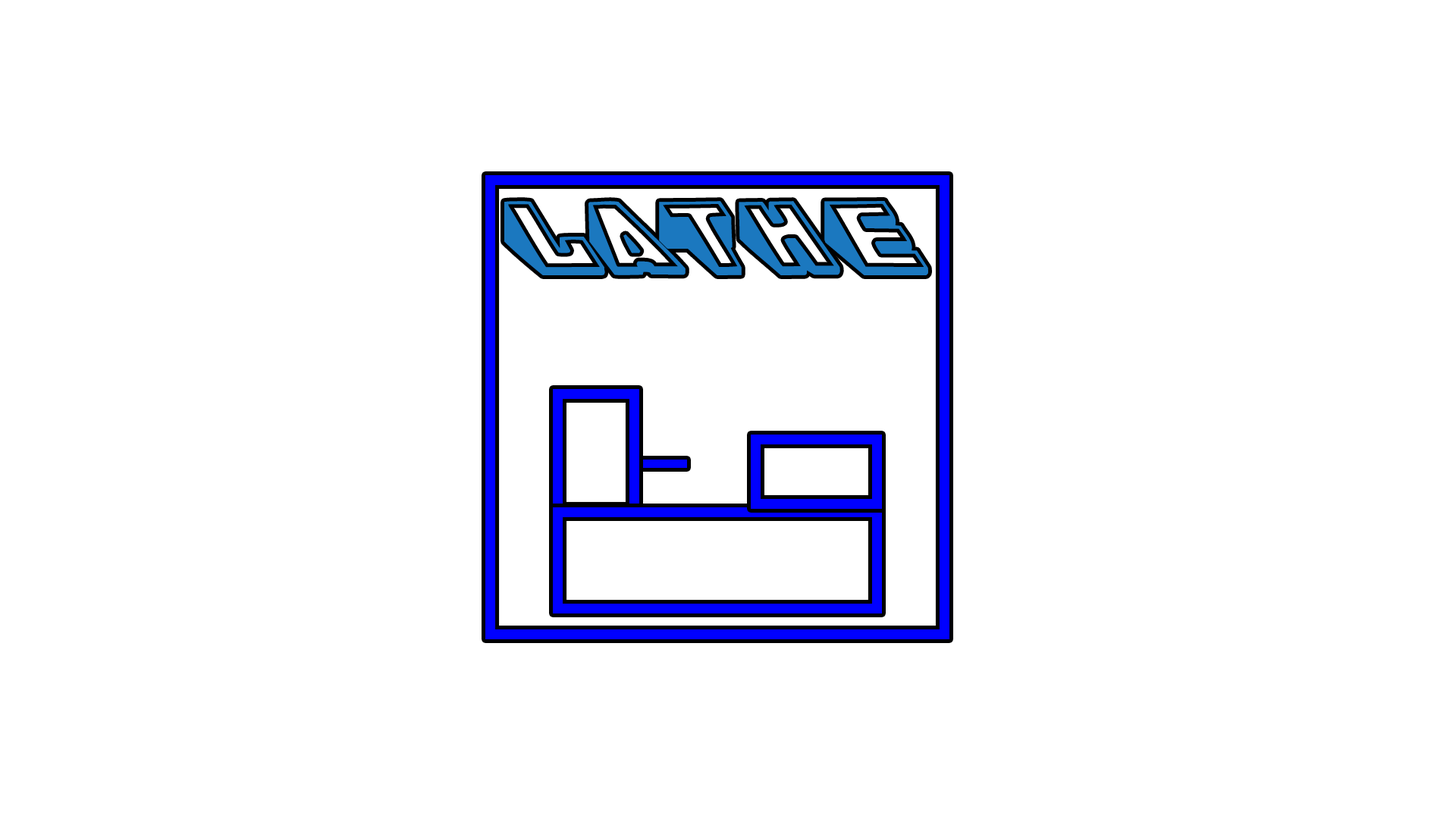
<style>
.page{position:relative;width:1456px;height:819px;background:#ffffff}
.page>*{position:absolute;margin:0}
.t1{font:86px "Wedgie-Regular";color:#1b78bf;text-transform:uppercase;font-weight:bold}
</style>
<div class="page">
<p class="t1" style="left:504px;top:201px;width:424px;height:74px">lathe</p>
</div>
